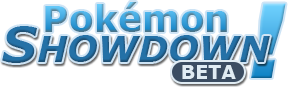
<style>
.page{position:relative;width:292px;height:88px;background:#ffffff}
.page>*{position:absolute;margin:0}
.t1{font:36px "Verdana-Bold"}
.t2{font:104px "Arial-Black";font-style:italic}
.t3{font:19px "Verdana-Bold";color:#e0ecf3}
</style>
<div class="page">
<p class="t1" style="left:45px;top:2px;width:182px;height:30px">Pokémon</p>
<p class="t2" style="left:251px;top:3px;width:35px;height:75px">!</p>
<p class="t3" style="left:182px;top:65px;width:54px;height:14px">BETA</p>
</div>
